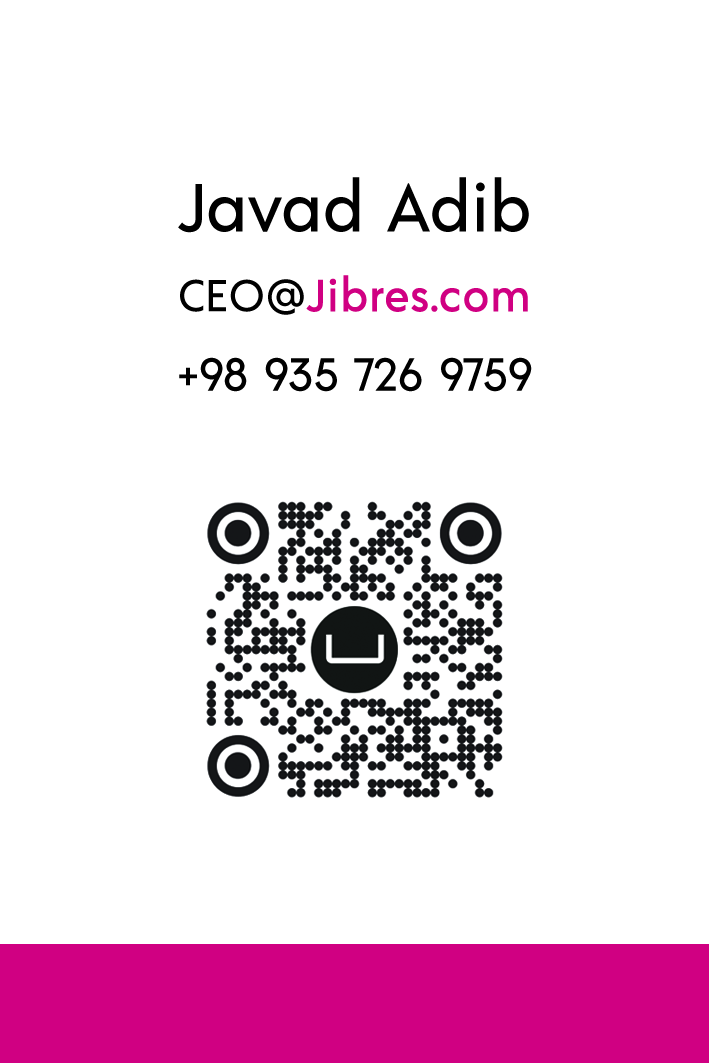
<style>
.page{position:relative;width:709px;height:1063px;background:#ffffff}
.page>*{position:absolute;margin:0}
.t1{font:67.8px "Acre-Medium";color:#000000}
.t2{font:44.8px "Acre-Medium";color:#d00083;font-weight:bold}
.t3{font:44.8px "Acre-Medium";color:#000000}
.t4{font:46.5px "Acre-Medium";color:#000000}
</style>
<div class="page">
<p class="t1" style="left:178px;top:177px;width:351px;height:56px">Javad Adib</p>
<p class="t2" style="left:180px;top:275px;width:348px;height:40px"><span class="t3">CEO@</span>Jibres.com</p>
<p class="t4" style="left:179px;top:357px;width:353px;height:35px">+98 935 726 9759</p>
</div>
